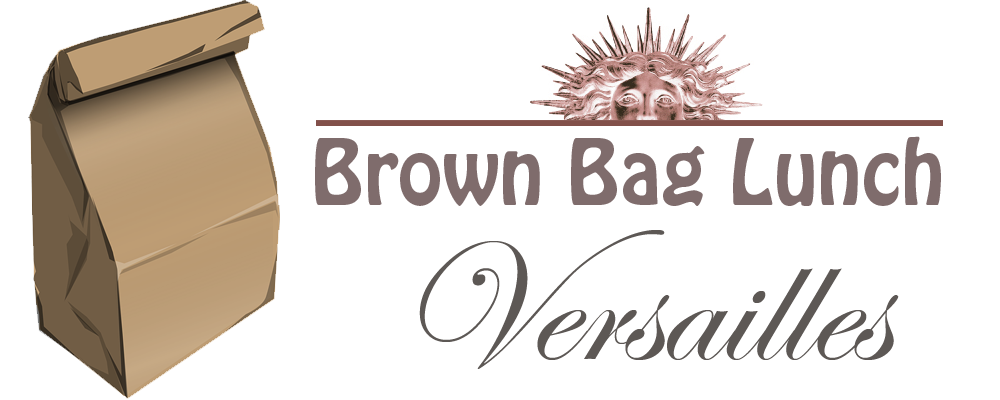
<style>
.page{position:relative;width:1000px;height:400px;background:#ffffff}
.page>*{position:absolute;margin:0}
.t1{font:80px "HoboStd";color:#7f6c6c}
.t2{font:180px "EdwardianScriptITC";color:#5d5855}
</style>
<div class="page">
<p class="t1" style="left:315px;top:136px;width:626px;height:70px">Brown Bag Lunch</p>
<p class="t2" style="left:419px;top:230px;width:480px;height:139px">Versailles</p>
</div>
